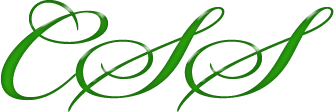
<style>
.page{position:relative;width:334px;height:112px;background:#ffffff}
.page>*{position:absolute;margin:0}
.t1{font:200px "BickhamScriptPro-Regular";color:#21820d}
</style>
<div class="page">
<p class="t1" style="left:0px;top:0px;width:334px;height:112px">CSS</p>
</div>
